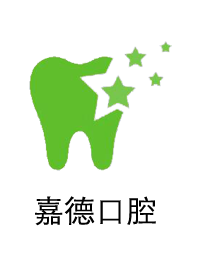
<style>
.page{position:relative;width:200px;height:280px;background:#ffffff}
.page>*{position:absolute;margin:0}
.t1{font:31px "STXihei";color:#020202}
</style>
<div class="page">
<p class="t1" style="left:35px;top:196px;width:121px;height:30px">嘉德口腔</p>
</div>
